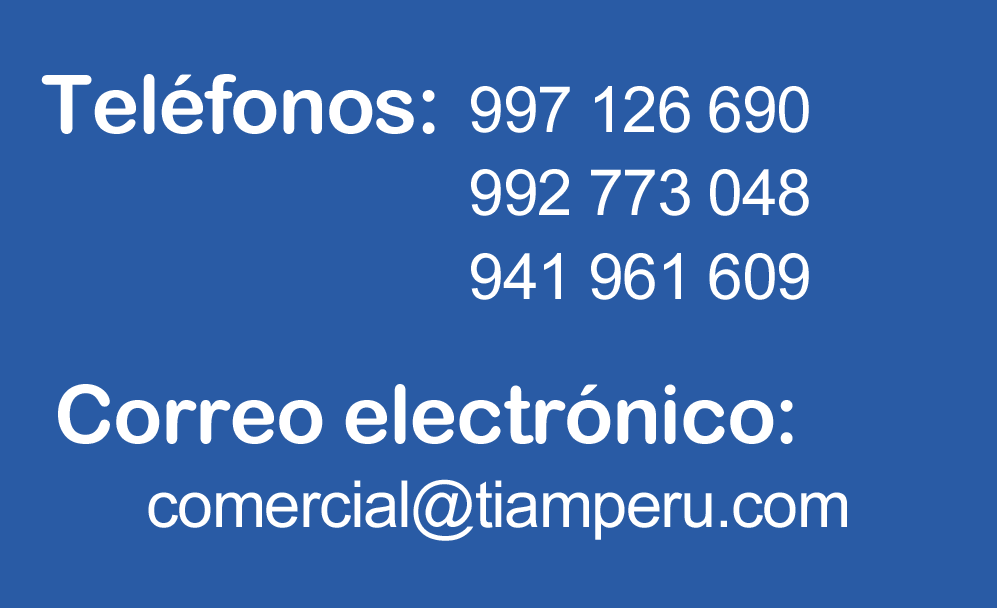
<style>
.page{position:relative;width:997px;height:608px;background:#295ba5}
.page>*{position:absolute;margin:0}
.t1{font:81px "ArialRoundedMTBold";letter-spacing:-0.022em;color:#ffffff}
.t2{font:63.6px/83.3px "ArialMT";letter-spacing:-0.022em;color:#ffffff}
.t3{font:64.7px "ArialMT";letter-spacing:-0.022em;color:#ffffff}
</style>
<div class="page">
<p class="t1" style="left:41px;top:74px;width:394px;height:60px">Teléfonos:</p>
<p class="t2" style="left:471px;top:86px;width:338px;height:214px">997 126 690<br>992 773 048<br>941 961 609</p>
<p class="t1" style="left:58px;top:384px;width:735px;height:60px">Correo electrónico:</p>
<p class="t3" style="left:148px;top:479px;width:699px;height:62px">comercial@tiamperu.com</p>
</div>
